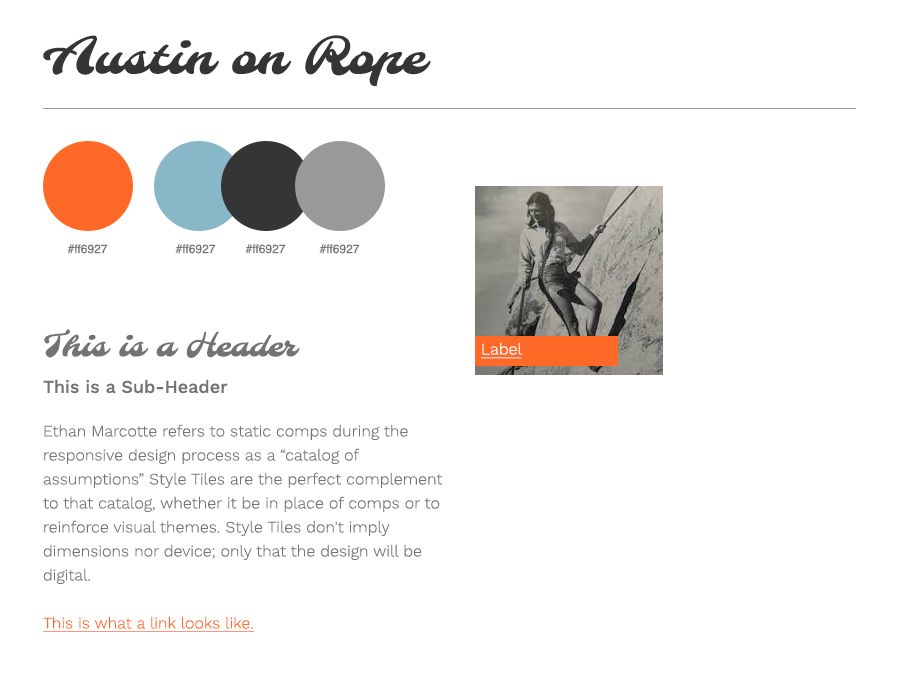
<style>
.page{position:relative;width:900px;height:700px;background:#ffffff}
.page>*{position:absolute;margin:0}
.t1{font:50px "Molle-Regular";color:#343534}
.t2{font:12px "Helvetica";color:#737373}
.t3{font:32px "Molle-Regular";color:#737373}
.t4{font:16px "WorkSans-Light";color:#ffffff;text-decoration:underline}
.t5{font:18px "WorkSans-Medium";color:#737373}
.t6{font:16px/24px "WorkSans-Light";color:#737373}
.t7{font:16px "WorkSans-Light";color:#ff6927;text-decoration:underline}
</style>
<div class="page">
<p class="t1" style="left:43px;top:35px;width:388px;height:51px">Austin on Rope</p>
<p class="t2" style="left:67px;top:244px;width:41px;height:10px">#ff6927</p>
<p class="t2" style="left:175px;top:244px;width:41px;height:10px">#ff6927</p>
<p class="t2" style="left:245px;top:244px;width:41px;height:10px">#ff6927</p>
<p class="t2" style="left:319px;top:244px;width:41px;height:10px">#ff6927</p>
<p class="t3" style="left:44px;top:329px;width:256px;height:29px">This is a Header</p>
<p class="t4" style="left:481px;top:342px;width:41px;height:17px">Label</p>
<p class="t5" style="left:43px;top:379px;width:185px;height:15px">This is a Sub-Header</p>
<p class="t6" style="left:43px;top:424px;width:400px;height:160px">Ethan Marcotte refers to static comps during the responsive design process as a “catalog of assumptions” Style Tiles are the perfect complement to that catalog, whether it be in place of comps or to reinforce visual themes. Style Tiles don't imply dimensions nor device; only that the design will be digital.</p>
<p class="t7" style="left:43px;top:616px;width:211px;height:16px">This is what a link looks like.</p>
</div>
